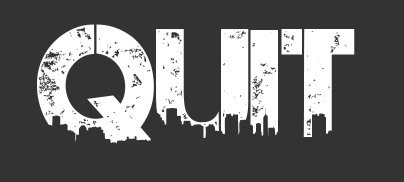
<style>
.page{position:relative;width:404px;height:182px;background:#333333}
.page>*{position:absolute;margin:0}
.t1{font:150px "UrbanJungleDEMO";color:#ffffff}
</style>
<div class="page">
<p class="t1" style="left:37px;top:24px;width:318px;height:120px">Quit</p>
</div>
